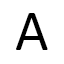
<style>
.page{position:relative;width:64px;height:64px;background:#ffffff}
.page>*{position:absolute;margin:0}
.t1{font:58.3px "Calibri";color:#000000}
</style>
<div class="page">
<p class="t1" style="left:16px;top:13px;width:32px;height:37px">А</p>
</div>
